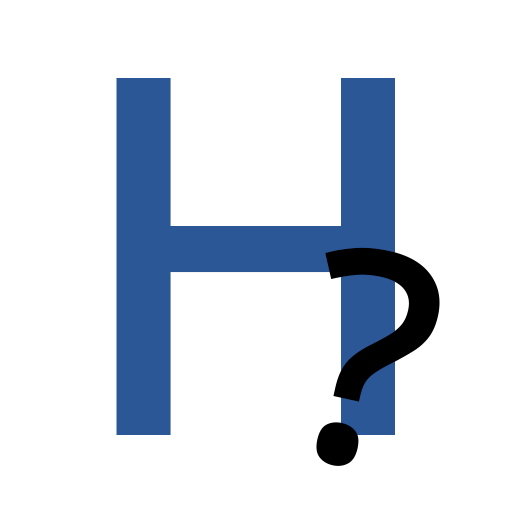
<style>
.page{position:relative;width:512px;height:512px;background:#ffffff}
.page>*{position:absolute;margin:0}
.t1{font:500px "NotoSans-Medium";color:#2b5797}
.t2{font:300px "NotoSans-Medium";color:#000000}
</style>
<div class="page">
<p class="t1" style="left:116px;top:78px;width:279px;height:357px">H</p>
<p class="t2" style="left:316px;top:247px;width:124px;height:219px;rotate:13deg">?</p>
</div>
